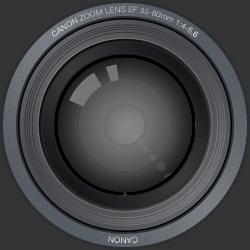
<style>
.page{position:relative;width:250px;height:250px;background:#333333}
.page>*{position:absolute;margin:0}
.t1{font:8px "HelveticaNeue";color:#b0b0b0}
.t2{font:8.1px "HelveticaNeue";color:#ffffff}
</style>
<div class="page">
<p class="t1" style="left:52px;top:6px;width:146px;height:31px;rotate:180deg">CANON ZOOM LENS EF 35-80mm 1:4-5.6</p>
<p class="t2" style="left:108px;top:236px;width:30px;height:7px">CANON</p>
</div>
